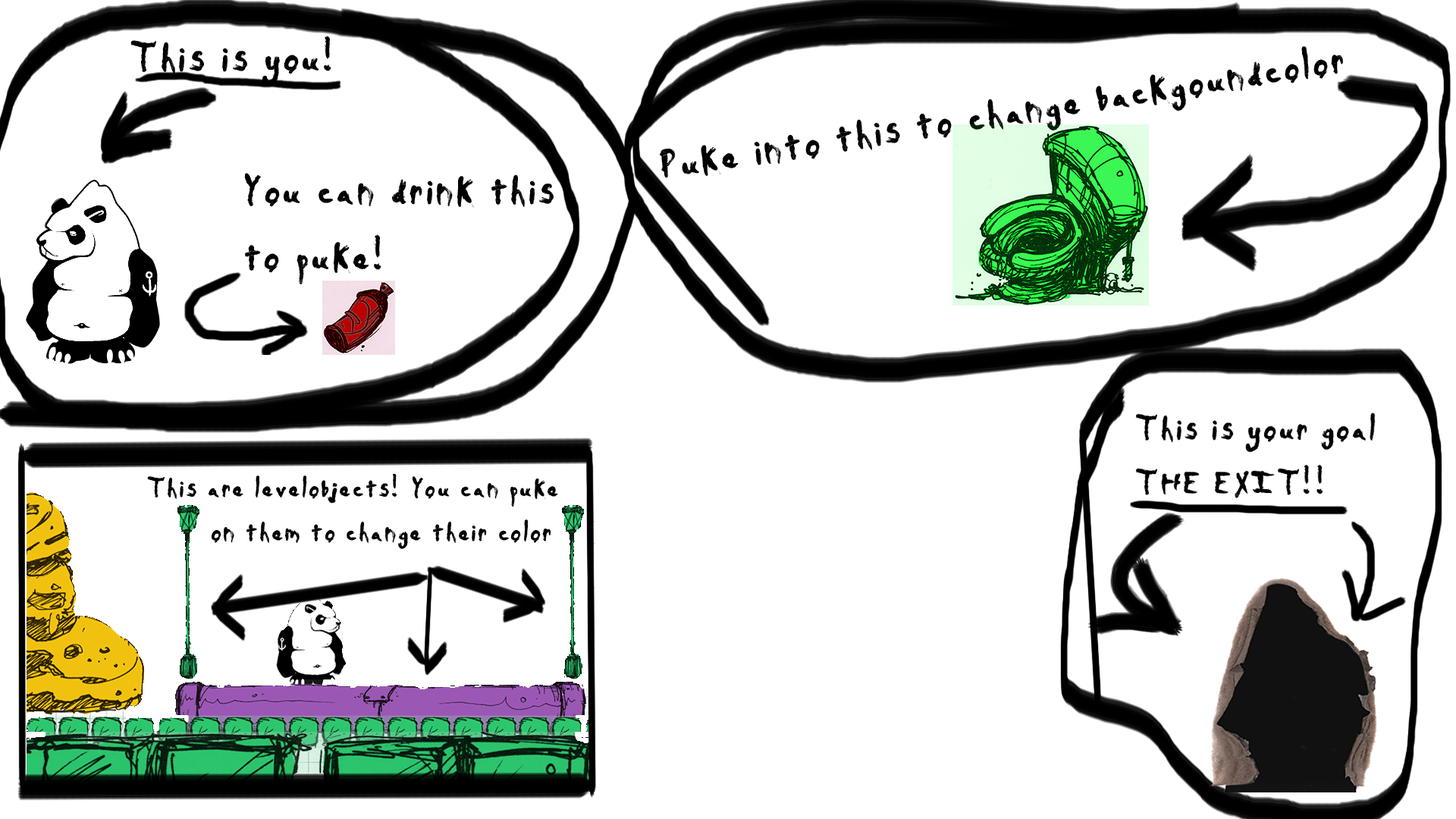
<style>
.page{position:relative;width:1456px;height:819px;background:#ffffff}
.page>*{position:absolute;margin:0}
.t1{font:54.6px "Daubmark";color:#000000}
.t2{font:36.4px "Daubmark";color:#000000}
</style>
<div class="page">
<p class="t1" style="left:130px;top:36px;width:201px;height:50px">This is you!</p>
<p class="t1" style="left:660px;top:46px;width:684px;height:132px;rotate:-9deg">Puke into this to change backgoundcolor</p>
<p class="t1" style="left:244px;top:173px;width:310px;height:111px">You can drink this<br>to puke!</p>
<p class="t2" style="left:147px;top:472px;width:411px;height:77px">This are levelobjects! You can puke<br>   on them to change their color</p>
</div>
